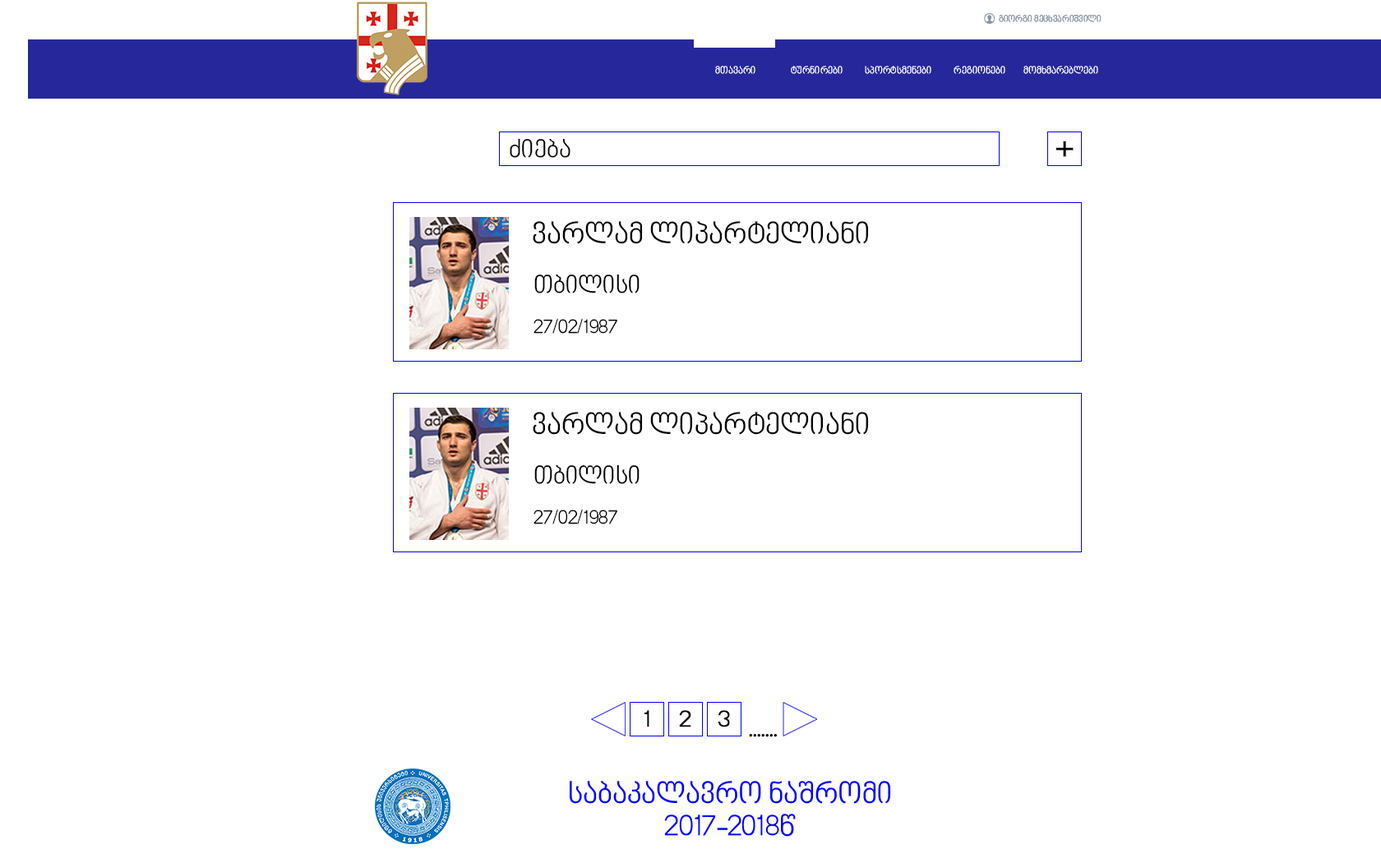
<style>
.page{position:relative;width:1381px;height:863px;background:#ffffff}
.page>*{position:absolute;margin:0}
.t1{font:24.7px "BPGNinoMtavruli";color:#000000}
.t2{font:39.5px "BPGNinoMtavruli";color:#000000;font-weight:bold}
.t3{font:29.6px "BPGNinoMtavruli";color:#000000}
.t4{font:19.7px "BPGNinoMtavruli";color:#000000}
.t5{font:23.3px "BPGNinoMtavruli";color:#000000;font-weight:bold;scale:1.05 1}
.t6{font:24.7px "BPGNinoMtavruli";color:#000000;font-weight:bold}
</style>
<div class="page">
<p class="t1" style="left:510px;top:139px;width:61px;height:19px">ძიება</p>
<p class="t2" style="left:1056px;top:141px;width:18px;height:16px">+</p>
<p class="t3" style="left:533px;top:221px;width:336px;height:23px">ვარლამ ლიპარტელიანი</p>
<p class="t1" style="left:534px;top:275px;width:106px;height:19px">თბილისი</p>
<p class="t4" style="left:534px;top:318px;width:83px;height:16px">27/02/1987</p>
<p class="t3" style="left:533px;top:412px;width:336px;height:23px">ვარლამ ლიპარტელიანი</p>
<p class="t1" style="left:534px;top:465px;width:106px;height:19px">თბილისი</p>
<p class="t4" style="left:534px;top:509px;width:83px;height:16px">27/02/1987</p>
<p class="t5" style="left:645px;top:710px;width:5px;height:18px">1</p>
<p class="t5" style="left:679px;top:710px;width:12px;height:18px">2</p>
<p class="t5" style="left:719px;top:710px;width:11px;height:18px">3</p>
<p class="t6" style="left:749px;top:734px;width:3px;height:3px">.</p>
<p class="t6" style="left:753px;top:734px;width:3px;height:3px">.</p>
<p class="t6" style="left:757px;top:734px;width:4px;height:3px">.</p>
<p class="t6" style="left:761px;top:734px;width:4px;height:3px">.</p>
<p class="t6" style="left:765px;top:734px;width:4px;height:3px">.</p>
<p class="t6" style="left:770px;top:734px;width:3px;height:3px">.</p>
<p class="t6" style="left:774px;top:734px;width:3px;height:3px">.</p>
</div>
